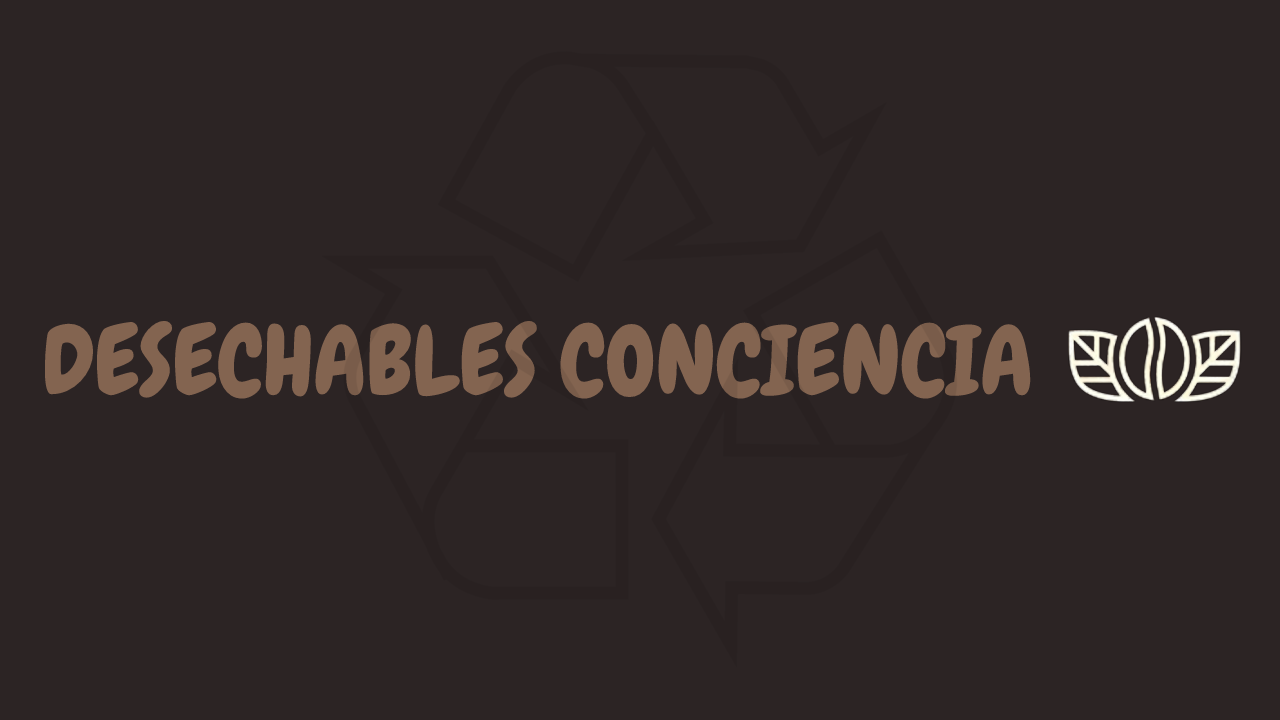
<style>
.page{position:relative;width:1280px;height:720px;background:#2c2424}
.page>*{position:absolute;margin:0}
.t1{font:96px "Chewy-Regular";color:#836450}
</style>
<div class="page">
<p class="t1" style="left:44px;top:320px;width:987px;height:79px">DESECHABLES CONCIENCIA</p>
</div>
